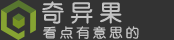
<style>
.page{position:relative;width:174px;height:40px;background:#333333}
.page>*{position:absolute;margin:0}
.t1{font:23.1px "JZunYuan";color:#c3c3c3}
.t2{font:13.2px "JZunYuan";color:#c3c3c3}
</style>
<div class="page">
<p class="t1" style="left:42px;top:1px;width:80px;height:23px">奇 异 果</p>
<p class="t2" style="left:43px;top:26px;width:96px;height:13px">看 点 有 意 思 的</p>
</div>
